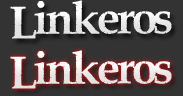
<style>
.page{position:relative;width:183px;height:96px;background:#333333}
.page>*{position:absolute;margin:0}
.t1{font:48px "PiratesBay";color:#eaeaea}
</style>
<div class="page">
<p class="t1" style="left:10px;top:0px;width:162px;height:39px">Linkeros</p>
<p class="t1" style="left:10px;top:50px;width:162px;height:39px">Linkeros</p>
</div>
